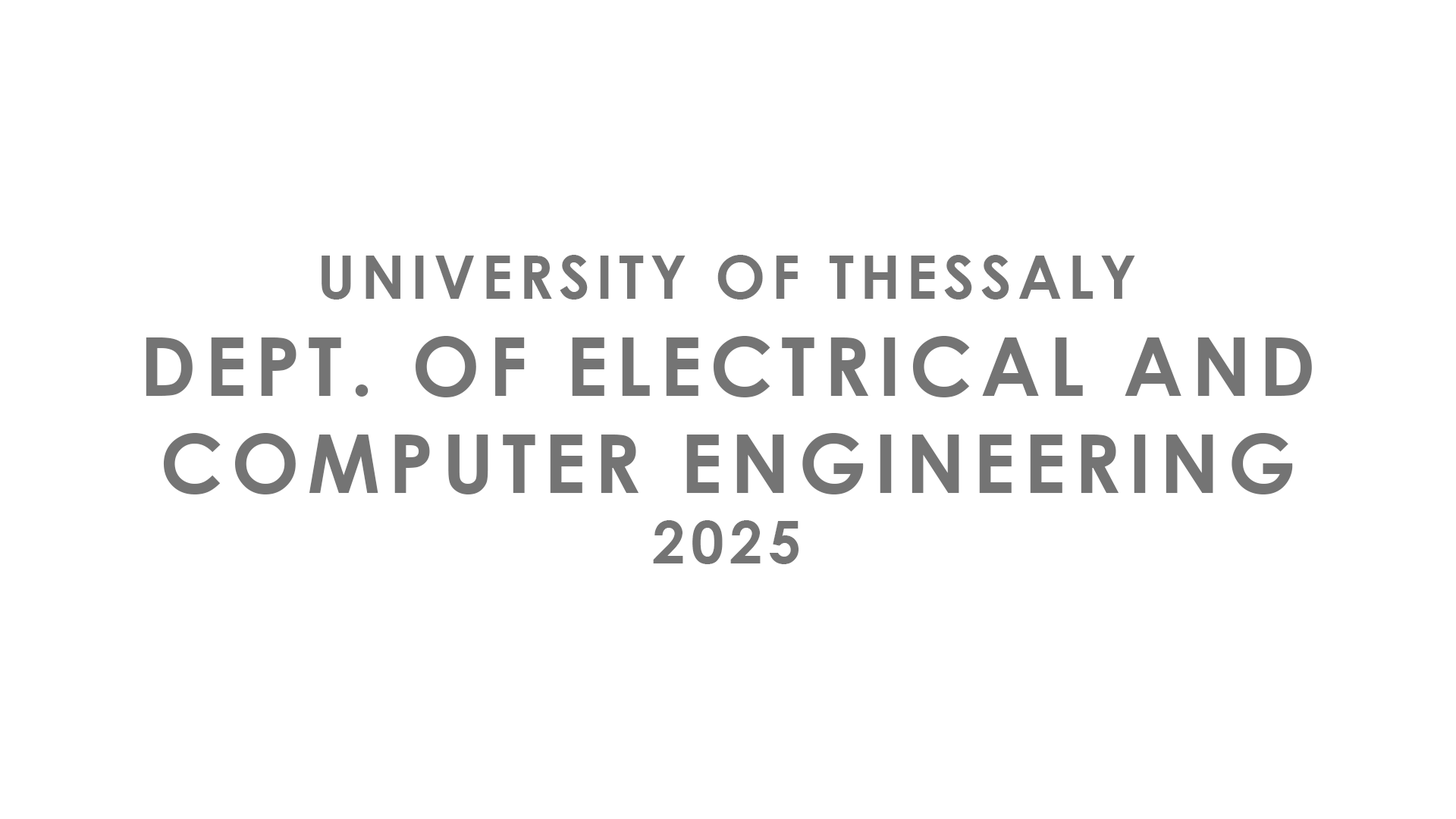
<style>
.page{position:relative;width:1456px;height:819px;background:#ffffff}
.page>*{position:absolute;margin:0}
.t1{font:81px "CenturyGothic-Bold";letter-spacing:0.1em;color:#747474}
.t2{font:59.7px "CenturyGothic-Bold";letter-spacing:0.1em;color:#747474}
.t3{font:58.8px "CenturyGothic-Bold";letter-spacing:0.1em;color:#747474}
</style>
<div class="page">
<p class="t1" style="left:146px;top:255px;width:1166px;height:309px;text-align:center"><span class="t2">UNIVERSITY OF THESSALY<br></span>DEPT. OF ELECTRICAL AND<br>COMPUTER ENGINEERING<br><span class="t3">2025</span></p>
</div>
